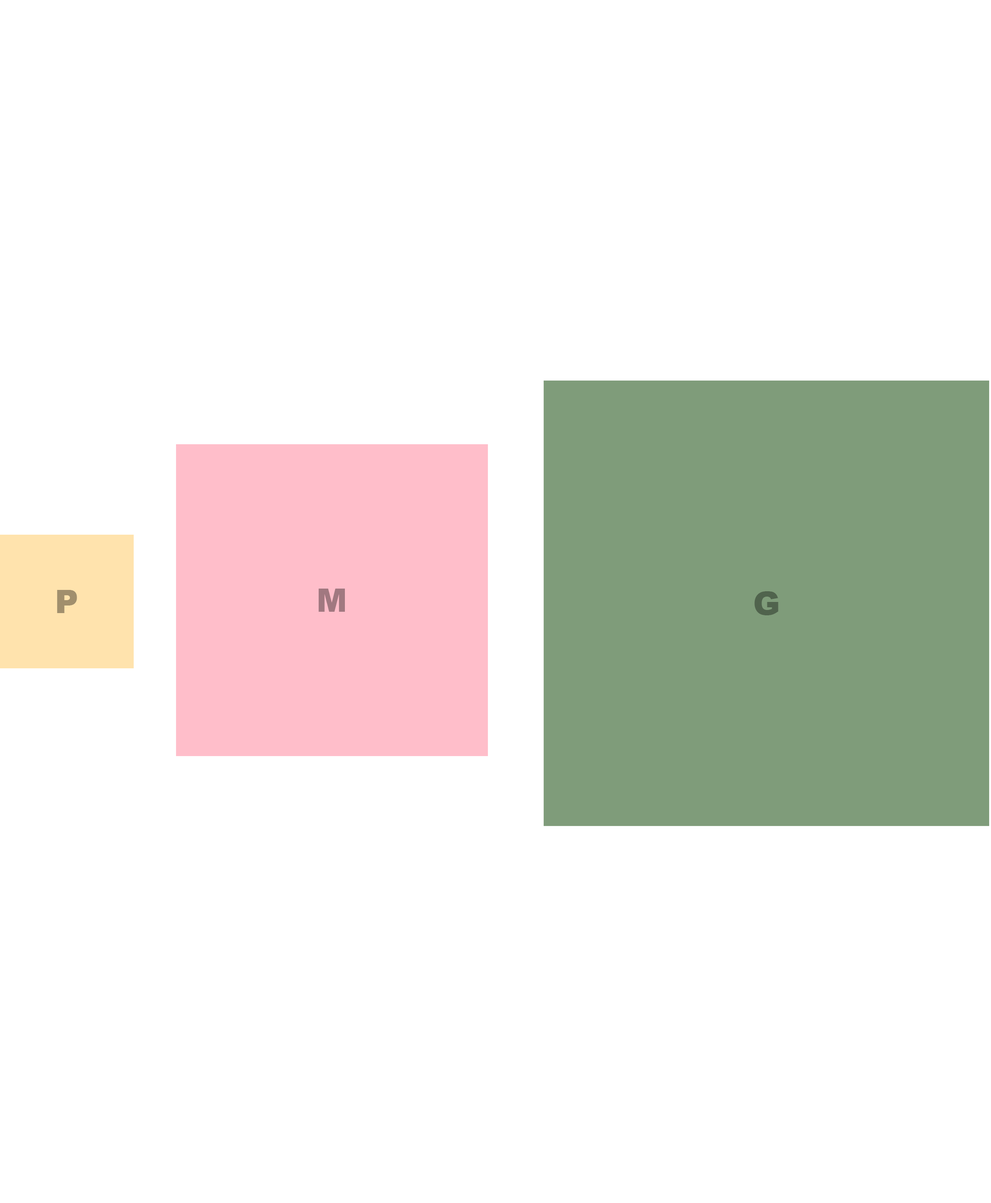
<style>
.page{position:relative;width:991px;height:1203px;background:#ffffff}
.page>*{position:absolute;margin:0}
.t1{font:32.5px "Arial-Black";letter-spacing:-0.04em;color:#a18f6d}
.t2{font:32.5px "Arial-Black";letter-spacing:-0.04em;color:#a17880}
.t3{font:32.5px "Arial-Black";letter-spacing:-0.04em;color:#50634d}
</style>
<div class="page">
<p class="t1" style="left:57px;top:590px;width:20px;height:23px">P</p>
<p class="t2" style="left:319px;top:589px;width:26px;height:23px">M</p>
<p class="t3" style="left:754px;top:591px;width:25px;height:24px">G</p>
</div>
